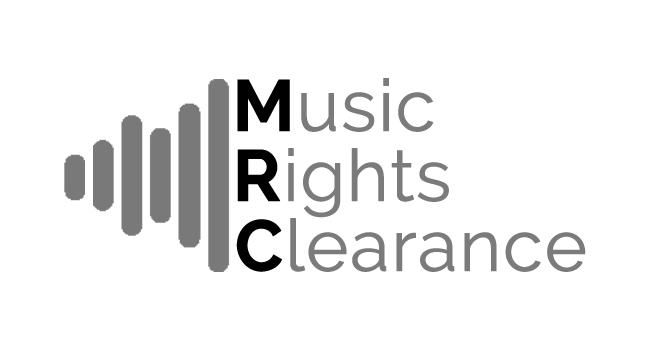
<style>
.page{position:relative;width:650px;height:350px;background:#ffffff}
.page>*{position:absolute;margin:0}
.t1{font:72px "Raleway-Regular";color:#7b7b7b;font-weight:bold}
.t2{font:72px "Raleway-Bold";color:#000000;font-weight:bold}
</style>
<div class="page">
<p class="t1" style="left:237px;top:78px;width:197px;height:54px"><span class="t2">M</span>usic</p>
<p class="t1" style="left:237px;top:148px;width:212px;height:70px"><span class="t2">R</span>ights</p>
<p class="t1" style="left:236px;top:218px;width:350px;height:54px"><span class="t2">C</span>learance</p>
</div>
